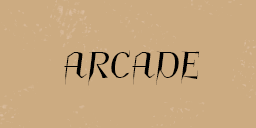
<style>
.page{position:relative;width:256px;height:128px;background:#ccab81}
.page>*{position:absolute;margin:0}
.t1{font:48px "Charakterny";color:#000000}
</style>
<div class="page">
<p class="t1" style="left:64px;top:50px;width:136px;height:36px">ARCADE</p>
</div>
